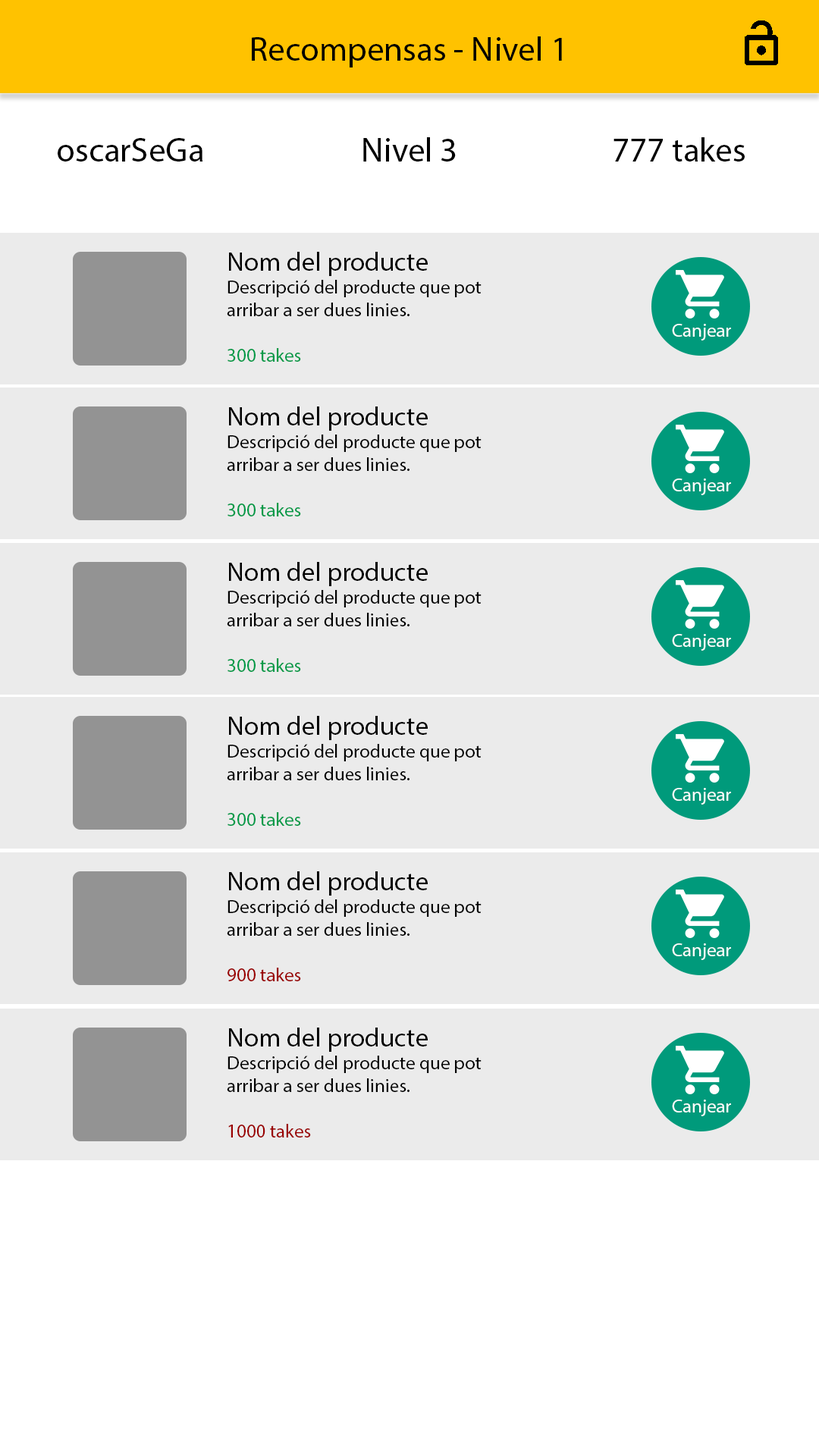
<style>
.page{position:relative;width:819px;height:1456px;background:#ebebeb}
.page>*{position:absolute;margin:0}
.t1{font:34.1px "MyriadPro-Regular";color:#000000}
.t2{font:19px "MyriadPro-Regular";color:#000000}
.t3{font:26.5px "MyriadPro-Regular";color:#000000}
.t4{font:19px "MyriadPro-Regular";color:#009a48}
.t5{font:19px "MyriadPro-Regular";color:#ffffff}
.t6{font:19px "MyriadPro-Regular";color:#9a0000}
</style>
<div class="page">
<p class="t1" style="left:252px;top:36px;width:310px;height:31px">Recompensas - Nivel 1</p>
<p class="t1" style="left:363px;top:137px;width:93px;height:25px">Nivel 3</p>
<p class="t1" style="left:613px;top:137px;width:132px;height:25px">777 takes</p>
<p class="t1" style="left:58px;top:138px;width:144px;height:24px">oscarSeGa</p>
<p class="t2" style="left:227px;top:252px;width:255px;height:110px"><span class="t3">Nom del producte<br></span>Descripció del producte que pot arribar a ser dues linies.<br><br><span class="t4">300 takes</span></p>
<p class="t5" style="left:672px;top:324px;width:59px;height:16px">Canjear</p>
<p class="t2" style="left:227px;top:406px;width:255px;height:110px"><span class="t3">Nom del producte<br></span>Descripció del producte que pot arribar a ser dues linies.<br><br><span class="t4">300 takes</span></p>
<p class="t5" style="left:672px;top:479px;width:59px;height:16px">Canjear</p>
<p class="t2" style="left:227px;top:562px;width:255px;height:110px"><span class="t3">Nom del producte<br></span>Descripció del producte que pot arribar a ser dues linies.<br><br><span class="t4">300 takes</span></p>
<p class="t5" style="left:672px;top:634px;width:59px;height:17px">Canjear</p>
<p class="t2" style="left:227px;top:716px;width:255px;height:110px"><span class="t3">Nom del producte<br></span>Descripció del producte que pot arribar a ser dues linies.<br><br><span class="t4">300 takes</span></p>
<p class="t5" style="left:672px;top:788px;width:59px;height:17px">Canjear</p>
<p class="t2" style="left:227px;top:871px;width:255px;height:110px"><span class="t3">Nom del producte<br></span>Descripció del producte que pot arribar a ser dues linies.<br><br><span class="t6">900 takes</span></p>
<p class="t5" style="left:672px;top:943px;width:59px;height:17px">Canjear</p>
<p class="t2" style="left:227px;top:1028px;width:255px;height:109px"><span class="t3">Nom del producte<br></span>Descripció del producte que pot arribar a ser dues linies.<br><br><span class="t6">1000 takes</span></p>
<p class="t5" style="left:672px;top:1100px;width:59px;height:16px">Canjear</p>
</div>
